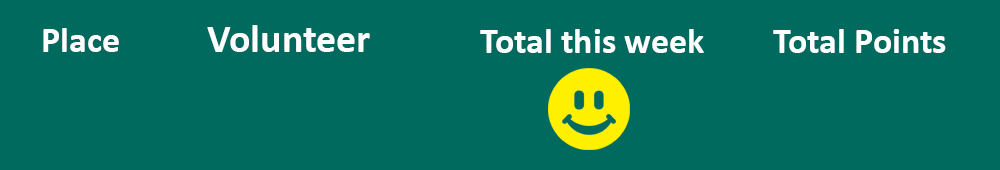
<style>
.page{position:relative;width:1000px;height:170px;background:#006a5e}
.page>*{position:absolute;margin:0}
.t1{font:36px "Calibri-Bold";color:#ffffff}
.t2{font:40px "Calibri-Bold";color:#ffffff}
</style>
<div class="page">
<p class="t1" style="left:43px;top:28px;width:76px;height:24px">Place</p>
<p class="t2" style="left:207px;top:25px;width:163px;height:27px">Volunteer</p>
<p class="t1" style="left:480px;top:29px;width:224px;height:24px">Total this week</p>
<p class="t1" style="left:773px;top:29px;width:173px;height:24px">Total Points</p>
</div>
